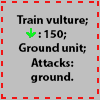
<style>
.page{position:relative;width:100px;height:100px;background:#bfbfbf}
.page>*{position:absolute;margin:0}
.t1{font:12px "MyriadPro-Bold";color:#000000}
</style>
<div class="page">
<p class="t1" style="left:16px;top:15px;width:72px;height:68px;text-align:center">Train vulture;<br>: 150;<br>Ground unit;<br>Attacks: ground.</p>
</div>
